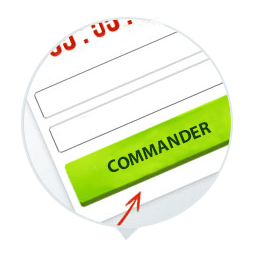
<style>
.page{position:relative;width:256px;height:258px;background:#ffffff}
.page>*{position:absolute;margin:0}
.t1{font:18px "MyriadPro-Bold";color:#153e13}
</style>
<div class="page">
<p class="t1" style="left:107px;top:122px;width:105px;height:50px;rotate:-23deg">COMMANDER</p>
</div>
